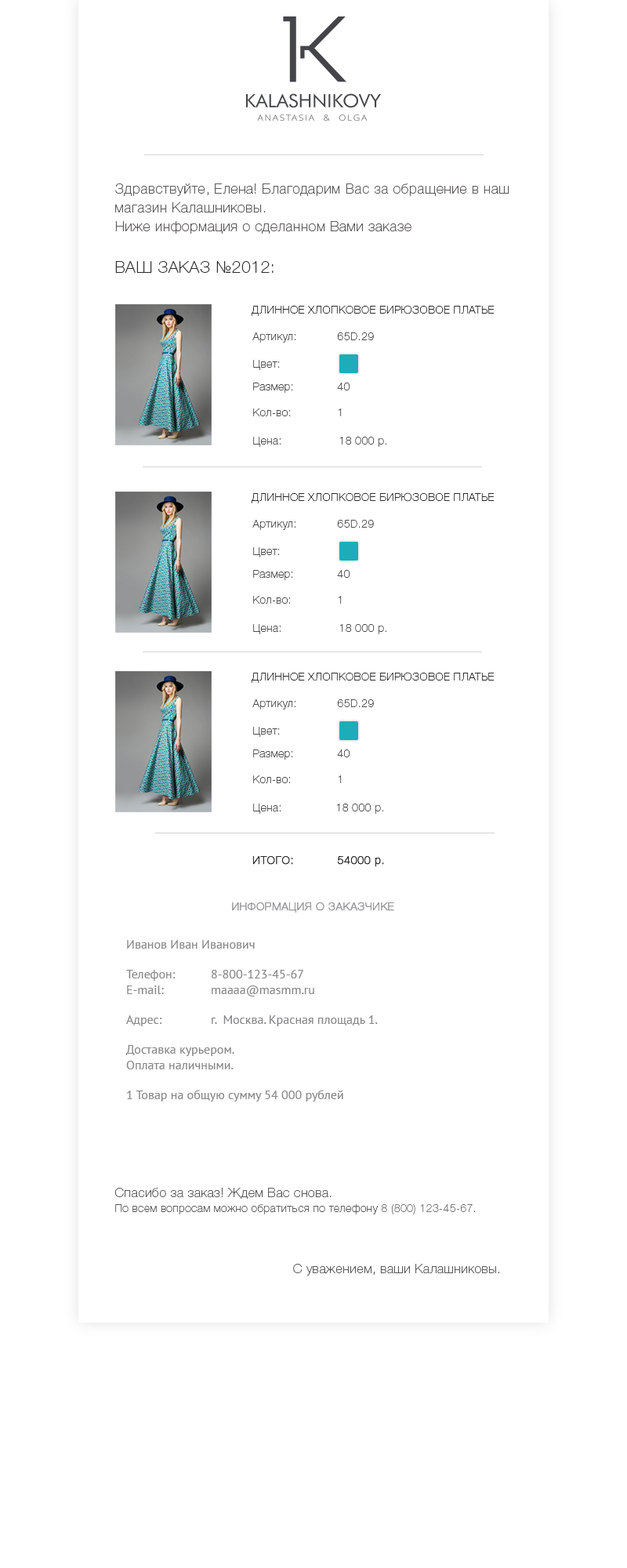
<style>
.page{position:relative;width:627px;height:1568px;background:#ffffff}
.page>*{position:absolute;margin:0}
.t1{font:14.1px/18.8px "HelveticaNeueCyr-Thin";letter-spacing:0.03em;color:#5c5959}
.t2{font:16.5px "HelveticaNeueCyr-Thin";letter-spacing:0.03em;color:#2b2b2b;text-transform:uppercase}
.t3{font:11px "HelveticaNeueCyr-Thin";letter-spacing:0.03em;color:#2b2b2b;text-transform:uppercase}
.t4{font:11px "HelveticaNeueCyr-Thin";letter-spacing:0.03em;color:#4d4d4e}
.t5{font:11px "HelveticaNeueCyr-Thin";letter-spacing:0.03em;color:#2b2b2b;text-transform:uppercase;font-weight:bold}
.t6{font:11px "HelveticaNeueCyr-Thin";letter-spacing:0.03em;color:#2b2b2b;font-weight:bold}
.t7{font:11px "HelveticaNeueCyr-Thin";letter-spacing:0.03em;color:#969699;text-transform:uppercase;font-weight:bold}
.t8{font:12.5px "PTSans-Regular";color:#88888b}
.t9{font:11px "HelveticaNeueCyr-Thin";letter-spacing:0.03em;color:#5c5959}
.t10{font:12.8px "HelveticaNeueCyr-Thin";letter-spacing:0.03em;color:#5c5959}
.t11{font:11px "HelveticaNeueCyr-Thin";letter-spacing:0.03em;color:#747475}
</style>
<div class="page">
<p class="t1" style="left:115px;top:183px;width:395px;height:51px">Здравствуйте, Елена! Благодарим Вас за обращение в наш <br>магазин Калашниковы.  <br>Ниже информация о сделанном Вами заказе</p>
<p class="t2" style="left:115px;top:261px;width:159px;height:12px">Ваш заказ №2012:</p>
<p class="t3" style="left:251px;top:305px;width:244px;height:11px">Длинное хлопковое бирюзовое платье</p>
<p class="t4" style="left:252px;top:332px;width:122px;height:11px">Артикул:   65D.29</p>
<p class="t4" style="left:253px;top:360px;width:27px;height:10px">Цвет:</p>
<p class="t4" style="left:253px;top:383px;width:97px;height:10px">Размер:       40</p>
<p class="t4" style="left:253px;top:408px;width:89px;height:9px">Кол-во:        1</p>
<p class="t4" style="left:253px;top:437px;width:28px;height:10px">Цена:</p>
<p class="t4" style="left:339px;top:437px;width:48px;height:10px">18 000 р.</p>
<p class="t3" style="left:251px;top:492px;width:244px;height:11px">Длинное хлопковое бирюзовое платье</p>
<p class="t4" style="left:252px;top:520px;width:122px;height:10px">Артикул:   65D.29</p>
<p class="t4" style="left:253px;top:547px;width:27px;height:10px">Цвет:</p>
<p class="t4" style="left:253px;top:570px;width:97px;height:10px">Размер:       40</p>
<p class="t4" style="left:253px;top:596px;width:89px;height:8px">Кол-во:        1</p>
<p class="t4" style="left:253px;top:624px;width:28px;height:10px">Цена:</p>
<p class="t4" style="left:339px;top:624px;width:48px;height:10px">18 000 р.</p>
<p class="t3" style="left:251px;top:672px;width:244px;height:11px">Длинное хлопковое бирюзовое платье</p>
<p class="t4" style="left:252px;top:699px;width:122px;height:11px">Артикул:   65D.29</p>
<p class="t4" style="left:253px;top:727px;width:27px;height:10px">Цвет:</p>
<p class="t4" style="left:253px;top:750px;width:97px;height:10px">Размер:       40</p>
<p class="t4" style="left:253px;top:775px;width:89px;height:9px">Кол-во:        1</p>
<p class="t4" style="left:253px;top:804px;width:28px;height:10px">Цена:</p>
<p class="t4" style="left:336px;top:804px;width:47px;height:10px">18 000 р.</p>
<p class="t5" style="left:252px;top:856px;width:132px;height:11px">Итого:   54000 <span class="t6">р.</span></p>
<p class="t7" style="left:232px;top:902px;width:162px;height:11px">Информация о заказчике</p>
<p class="t8" style="left:125px;top:940px;width:253px;height:162px">Иванов Иван Иванович<br><br>Телефон:  8-800-123-45-67<br>E-mail:  maaaa@masmm.ru<br><br>Адрес:  г.  Москва. Красная площадь 1.<br><br>Доставка курьером.<br>Оплата наличными.<br><br>1 Товар на общую сумму 54 000 рублей</p>
<p class="t9" style="left:114px;top:1188px;width:361px;height:26px"><span class="t10">Спасибо за заказ! Ждем Вас снова. <br></span>По всем вопросам можно обратиться по телефону <span class="t11">8 (800) 123-45-67</span>.</p>
<p class="t10" style="left:293px;top:1264px;width:206px;height:12px">С уважением, ваши Калашниковы.</p>
</div>
